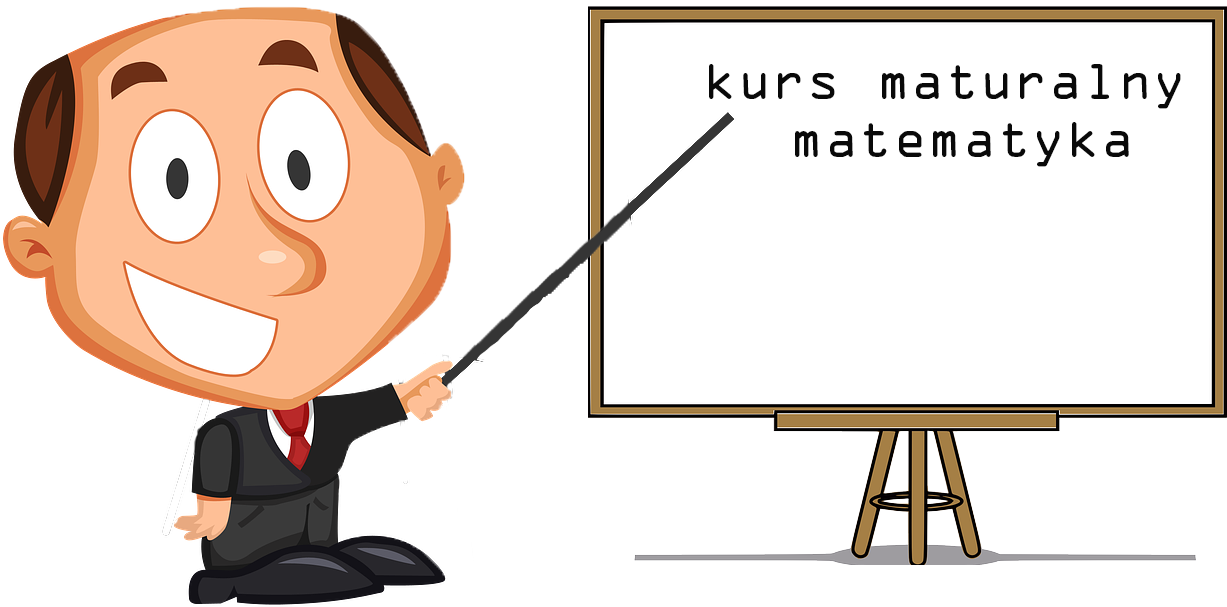
<style>
.page{position:relative;width:1227px;height:607px;background:#ffffff}
.page>*{position:absolute;margin:0}
.t1{font:48px "OCRAStd";color:#090909}
</style>
<div class="page">
<p class="t1" style="left:709px;top:64px;width:472px;height:103px;text-align:center">kurs maturalny <br>matematyka</p>
</div>
